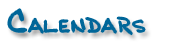
<style>
.page{position:relative;width:189px;height:45px;background:#ffffff}
.page>*{position:absolute;margin:0}
.t1{font:18px "BobbiesHand";color:#006699}
.t2{font:30px "BobbiesHand";color:#006699}
</style>
<div class="page">
<p class="t1" style="left:8px;top:9px;width:137px;height:26px"><span class="t2">C</span>ALENDARS</p>
</div>
